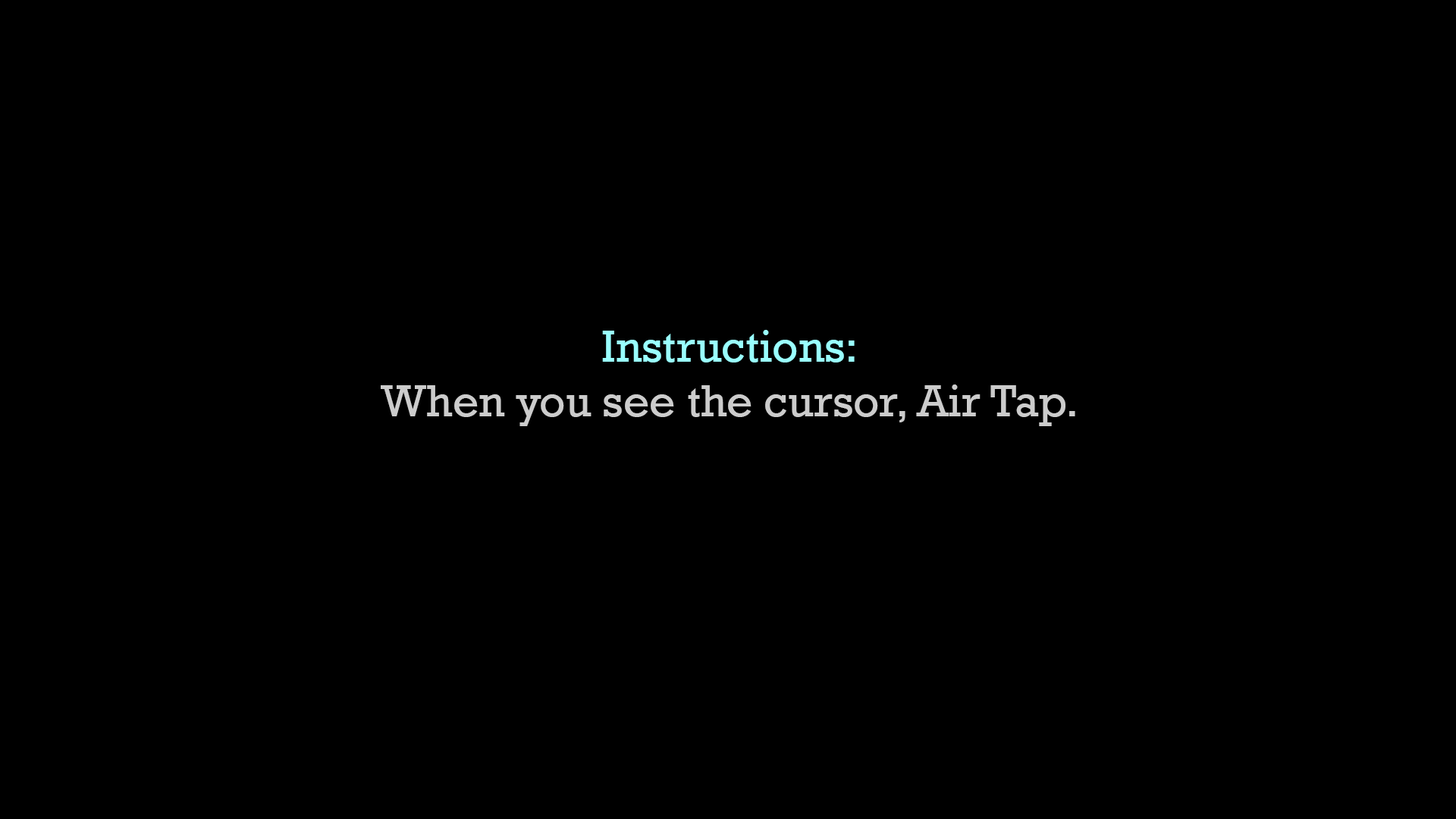
<style>
.page{position:relative;width:1456px;height:819px;background:#000000}
.page>*{position:absolute;margin:0}
.t1{font:45.5px/54.6px "Rockwell";color:#cccccc}
.t2{font:45.5px/54.6px "Rockwell";color:#99ffff}
</style>
<div class="page">
<p class="t1" style="left:381px;top:330px;width:694px;height:96px;text-align:center"><span class="t2">Instructions:<br></span>When you see the cursor, Air Tap.</p>
</div>
